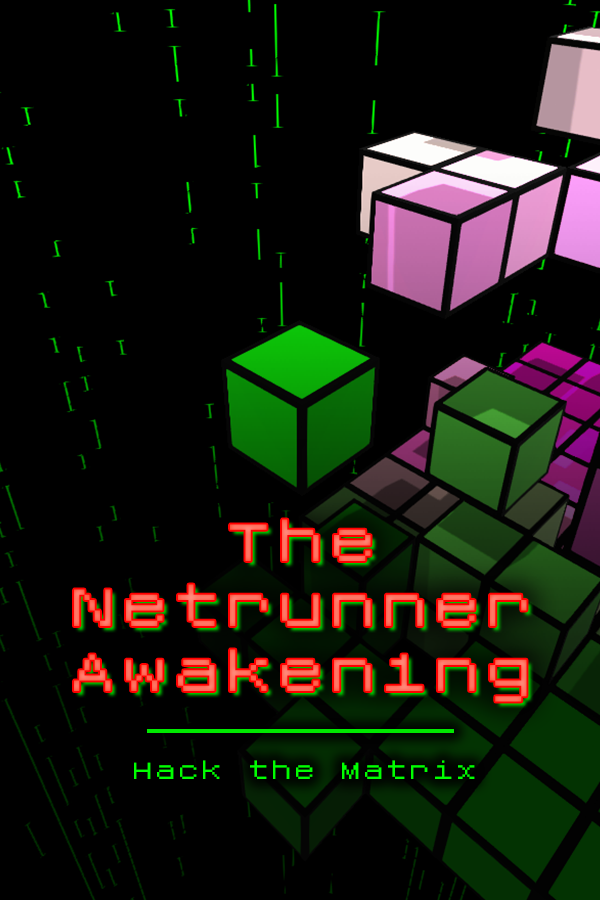
<style>
.page{position:relative;width:600px;height:900px;background:#000000}
.page>*{position:absolute;margin:0}
.t1{font:83.2px/64.7px "Roentgen-NBP";color:#ff705e}
.t2{font:37px "Roentgen-NBP";color:#00ff00}
</style>
<div class="page">
<p class="t1" style="left:74px;top:519px;width:453px;height:183px;text-align:center">The<br>Netrunner<br>Awaken1ng</p>
<p class="t2" style="left:134px;top:760px;width:341px;height:19px">Hack the Matrix</p>
</div>
